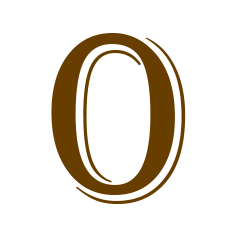
<style>
.page{position:relative;width:240px;height:240px;background:#ffffff}
.page>*{position:absolute;margin:0}
.t1{font:250px "Algerian";color:#683e00}
</style>
<div class="page">
<p class="t1" style="left:51px;top:33px;width:135px;height:171px">0</p>
</div>
